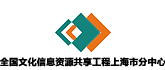
<style>
.page{position:relative;width:165px;height:70px;background:#ffffff}
.page>*{position:absolute;margin:0}
.t1{font:9px "MicrosoftYaHei-Bold";color:#000000;font-weight:bold}
</style>
<div class="page">
<p class="t1" style="left:0px;top:57px;width:166px;height:10px">全国文化信息资源共享工程上海市分中心</p>
</div>
